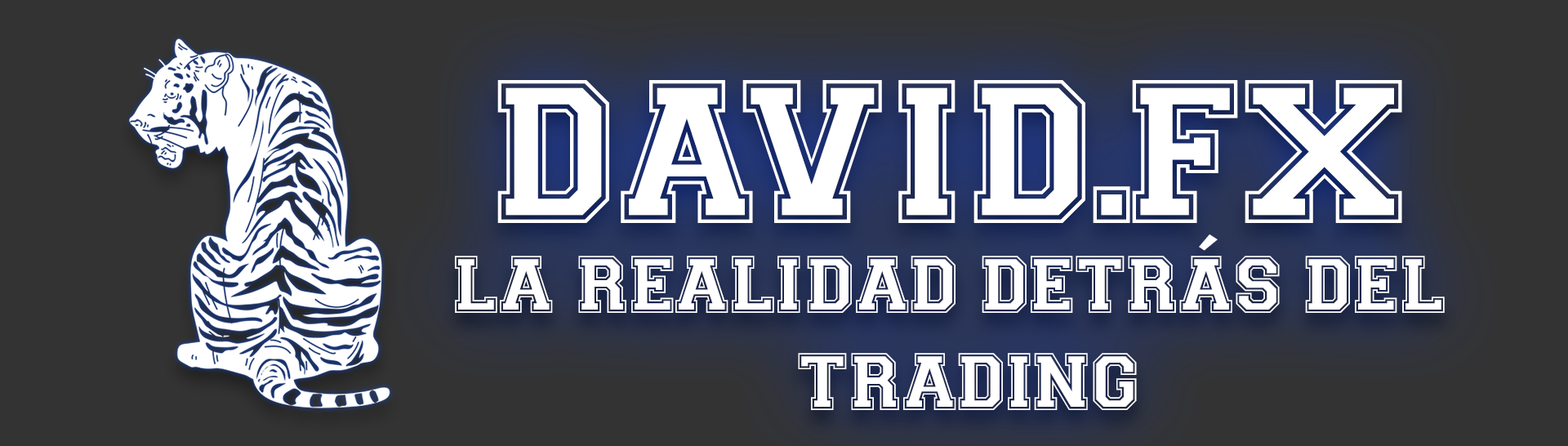
<style>
.page{position:relative;width:1568px;height:446px;background:#333333}
.page>*{position:absolute;margin:0}
.t1{font:204.2px "Varsity-Regular";color:#ffffff}
.t2{font:81.4px "Varsity-Regular";color:#ffffff}
</style>
<div class="page">
<p class="t1" style="left:497px;top:80px;width:905px;height:143px">DAVID.FX</p>
<p class="t2" style="left:455px;top:234px;width:990px;height:176px">LA REALIDAD DETRÁS DEL <br>               TRADING</p>
</div>
